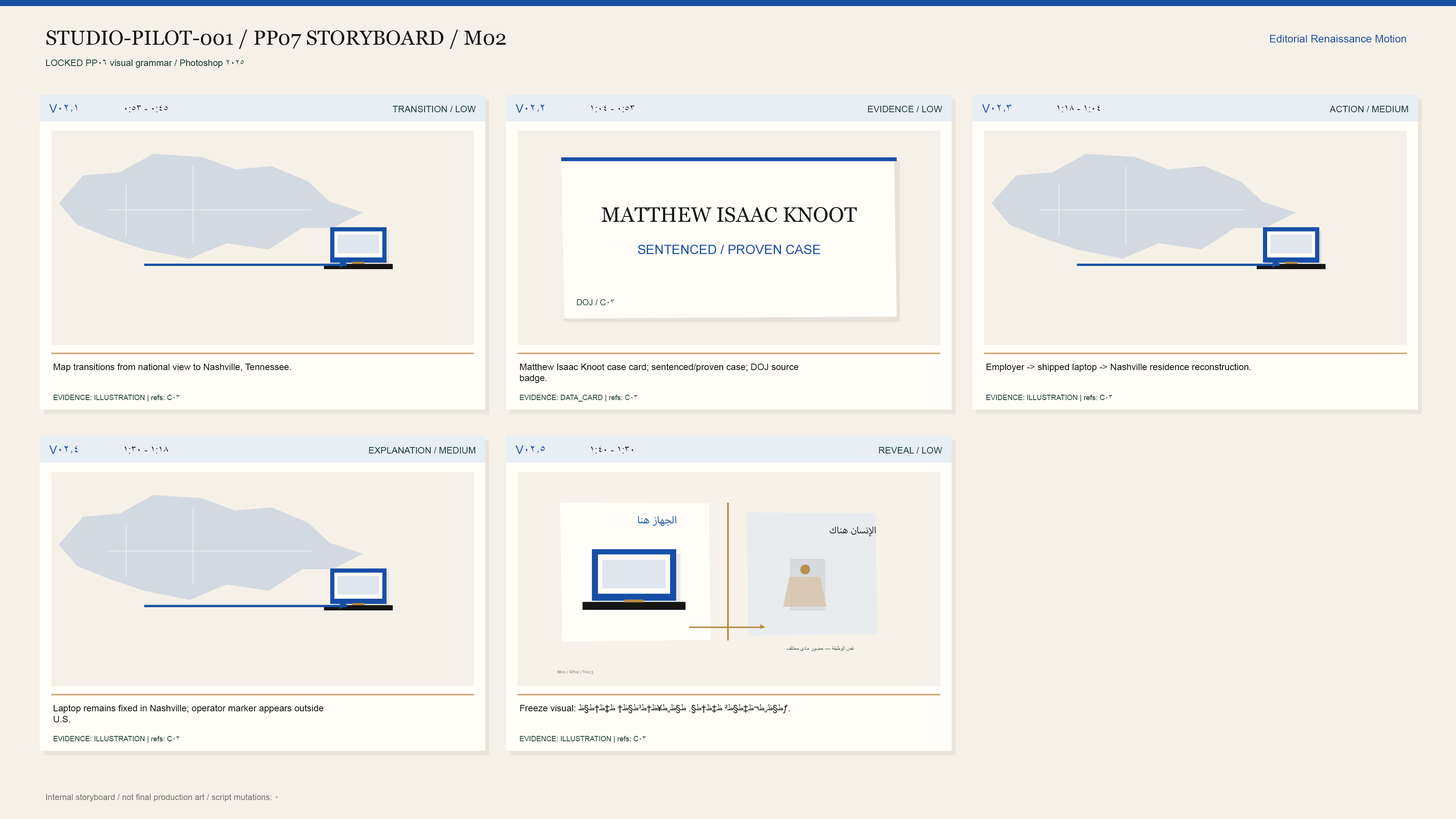
<style>
.page{position:relative;width:1456px;height:819px;background:#f6f1e8}
.page>*{position:absolute;margin:0}
.t1{font:20.5px "Georgia";color:#151515}
.t2{font:10.6px "ArialMT";color:#174fa6}
.t3{font:9.1px "ArialMT";color:#173c32}
.t4{font:11.8px "ArialMT";color:#174fa6}
.t5{font:9.9px "ArialMT";color:#151515}
.t6{font:20.9px "Georgia";color:#151515}
.t7{font:12.9px "ArialMT";color:#174fa6}
.t8{font:8.3px "ArialMT";color:#173c32}
.t9{font:9.1px "ArialMT";color:#151515}
.t10{font:7.2px "ArialMT";color:#173c32}
.t11{font:8.3px "ArialMT";color:#7b7974}
</style>
<div class="page">
<p class="t1" style="left:46px;top:30px;width:460px;height:19px">STUDIO-PILOT-001 / PP07 STORYBOARD / M02</p>
<p class="t2" style="left:1270px;top:35px;width:136px;height:7px">Editorial Renaissance Motion</p>
<p class="t3" style="left:46px;top:59px;width:198px;height:9px">LOCKED PP06 visual grammar / Photoshop 2025</p>
<p class="t4" style="left:49px;top:104px;width:28px;height:9px">V02.1</p>
<p class="t5" style="left:125px;top:105px;width:43px;height:7px">0:45 - 0:53</p>
<p class="t3" style="left:392px;top:106px;width:84px;height:6px">TRANSITION / LOW</p>
<p class="t4" style="left:516px;top:104px;width:28px;height:9px">V02.2</p>
<p class="t5" style="left:591px;top:105px;width:44px;height:7px">0:53 - 1:04</p>
<p class="t3" style="left:868px;top:106px;width:74px;height:6px">EVIDENCE / LOW</p>
<p class="t4" style="left:982px;top:104px;width:30px;height:9px">V02.3</p>
<p class="t5" style="left:1057px;top:105px;width:43px;height:7px">1:04 - 1:18</p>
<p class="t3" style="left:1330px;top:106px;width:78px;height:6px">ACTION / MEDIUM</p>
<p class="t6" style="left:601px;top:207px;width:256px;height:15px">MATTHEW ISAAC KNOOT</p>
<p class="t7" style="left:638px;top:245px;width:182px;height:9px">SENTENCED / PROVEN CASE</p>
<p class="t8" style="left:577px;top:299px;width:37px;height:7px">DOJ / C03</p>
<p class="t9" style="left:53px;top:363px;width:238px;height:9px">Map transitions from national view to Nashville, Tennessee.</p>
<p class="t9" style="left:520px;top:363px;width:279px;height:20px">Matthew Isaac Knoot case card; sentenced/proven case; DOJ source<br>badge.</p>
<p class="t9" style="left:986px;top:363px;width:265px;height:9px">Employer -&gt; shipped laptop -&gt; Nashville residence reconstruction.</p>
<p class="t10" style="left:53px;top:395px;width:126px;height:7px">EVIDENCE: ILLUSTRATION | refs: C03</p>
<p class="t10" style="left:520px;top:395px;width:117px;height:7px">EVIDENCE: DATA_CARD | refs: C03</p>
<p class="t10" style="left:986px;top:395px;width:126px;height:7px">EVIDENCE: ILLUSTRATION | refs: C03</p>
<p class="t4" style="left:49px;top:446px;width:29px;height:8px">V02.4</p>
<p class="t5" style="left:124px;top:446px;width:44px;height:7px">1:18 - 1:30</p>
<p class="t3" style="left:369px;top:447px;width:106px;height:6px">EXPLANATION / MEDIUM</p>
<p class="t4" style="left:516px;top:446px;width:29px;height:8px">V02.5</p>
<p class="t5" style="left:591px;top:446px;width:42px;height:7px">1:30 - 1:40</p>
<p class="t3" style="left:879px;top:447px;width:63px;height:6px">REVEAL / LOW</p>
<p class="t9" style="left:53px;top:704px;width:270px;height:18px">Laptop remains fixed in Nashville; operator marker appears outside<br>U.S.</p>
<p class="t9" style="left:520px;top:704px;width:270px;height:9px">Freeze visual: ط§ظ„ط¬ظ‡ط§ط² ظ‡ظ†ط§. ط§ظ„ط¥ظ†ط³ط§ظ† ظ‡ظ†ط§ظƒ.</p>
<p class="t10" style="left:53px;top:736px;width:126px;height:7px">EVIDENCE: ILLUSTRATION | refs: C03</p>
<p class="t10" style="left:520px;top:736px;width:126px;height:7px">EVIDENCE: ILLUSTRATION | refs: C03</p>
<p class="t11" style="left:46px;top:794px;width:232px;height:8px">Internal storyboard / not final production art / script mutations: 0</p>
</div>
